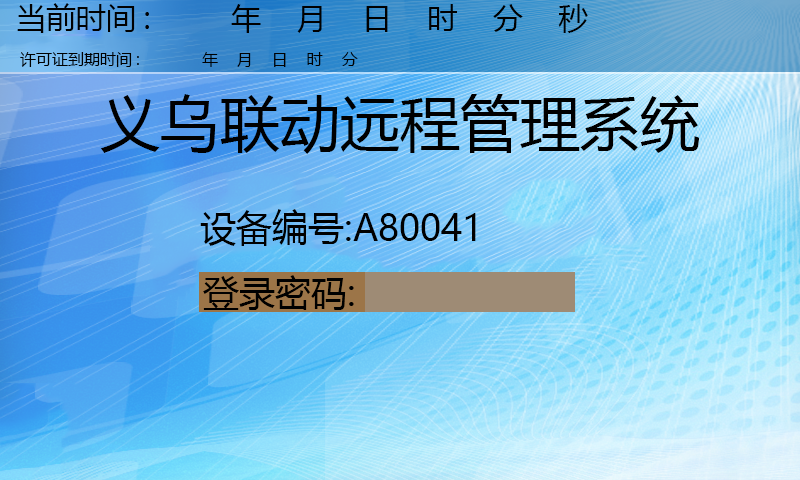
<style>
.page{position:relative;width:800px;height:480px}
.page>*{position:absolute;margin:0}
.t1{font:30px "MicrosoftYaHei";color:#000000}
.t2{font:16px "MicrosoftYaHei";color:#000000}
.t3{font:60px "MicrosoftYaHei";color:#000000}
.t4{font:36px "MicrosoftYaHei";color:#000000}
</style>
<div class="page">
<p class="t1" style="left:17px;top:3px;width:571px;height:30px">当前时间:         年    月    日    时    分    秒</p>
<p class="t2" style="left:20px;top:52px;width:338px;height:15px">许可证到期时间:         年    月    日    时    分</p>
<p class="t3" style="left:100px;top:94px;width:600px;height:60px">义乌联动远程管理系统</p>
<p class="t4" style="left:200px;top:209px;width:276px;height:37px">设备编号:A80041</p>
<p class="t4" style="left:203px;top:275px;width:151px;height:35px">登录密码:</p>
</div>
